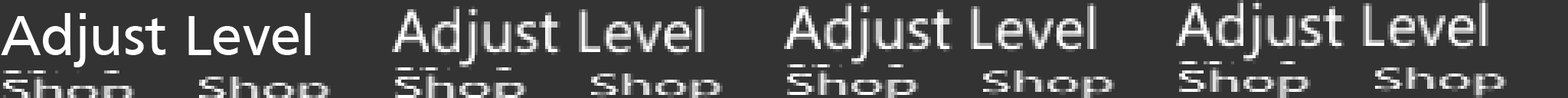
<style>
.page{position:relative;width:1568px;height:98px;background:#333333}
.page>*{position:absolute;margin:0}
.t1{font:59px "Frutiger";color:#ffffff}
</style>
<div class="page">
<p class="t1" style="left:1px;top:13px;width:310px;height:54px">Adjust Level</p>
</div>
